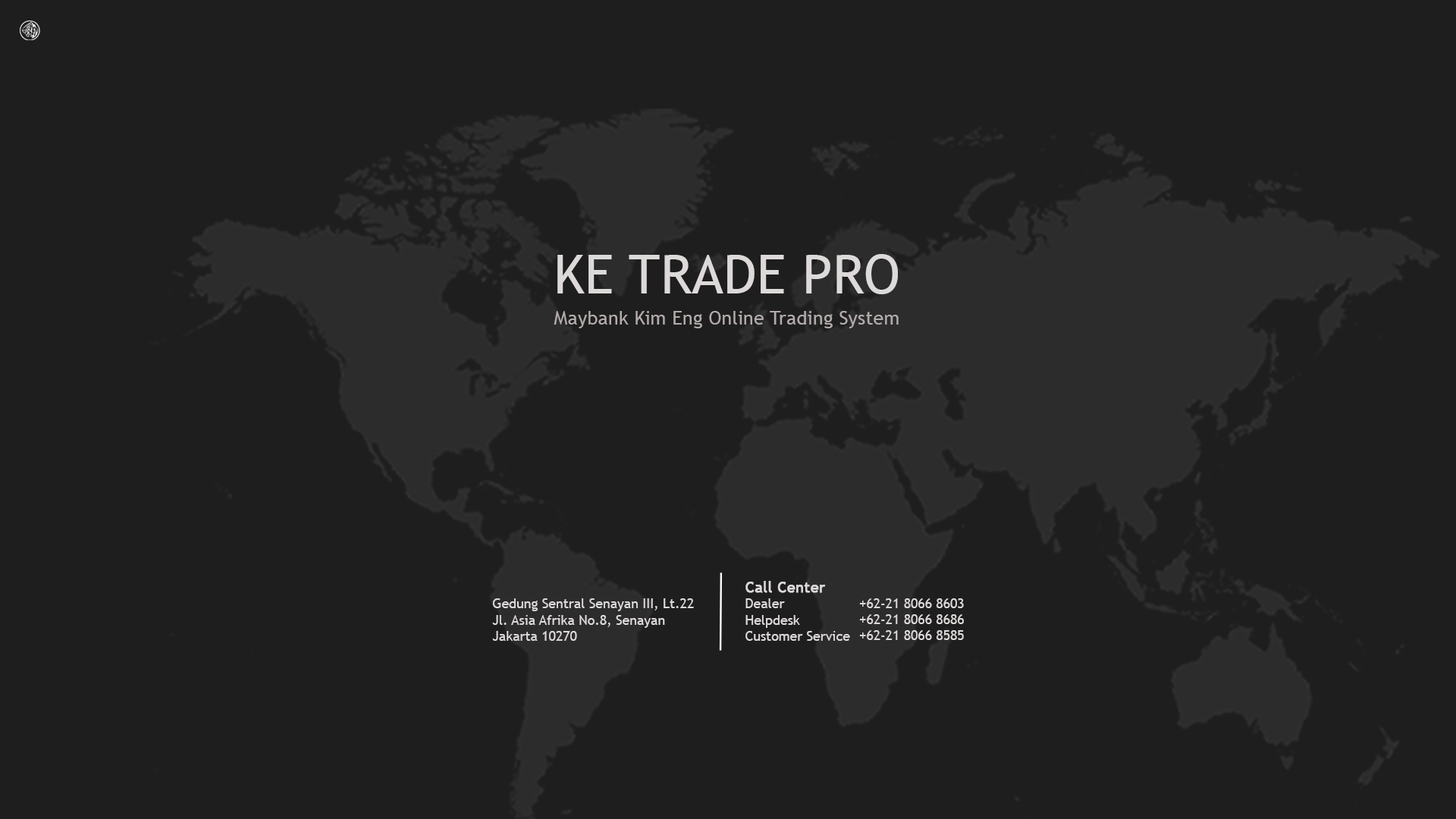
<style>
.page{position:relative;width:1456px;height:819px;background:#1e1e1e}
.page>*{position:absolute;margin:0}
.t1{font:19.3px/30.9px "TrebuchetMS";color:#beb5b5}
.t2{font:54.1px/30.9px "TrebuchetMS";color:#ebe7e7}
.t3{font:13.5px "TrebuchetMS";color:#ddd9d9}
.t4{font:15px "TrebuchetMS";color:#ddd9d9;font-weight:bold}
.t5{font:15px "TrebuchetMS";color:#ddd9d9;font-weight:bold;text-decoration:underline}
</style>
<div class="page">
<p class="t1" style="left:554px;top:254px;width:345px;height:74px;text-align:center;opacity:0.9"><span class="t2">KE TRADE PRO<br></span>Maybank Kim Eng Online Trading System</p>
<p class="t3" style="left:745px;top:581px;width:105px;height:60px"><span class="t4">Call Center<br></span>Dealer        <br>Helpdesk       <br>Customer Service</p>
<p class="t3" style="left:492px;top:598px;width:202px;height:43px"><span class="t5"><br></span>Gedung Sentral Senayan III, Lt.22<br>Jl. Asia Afrika No.8, Senayan<br>Jakarta 10270</p>
<p class="t3" style="left:859px;top:598px;width:105px;height:42px">+62-21 8066 8603<br>+62-21 8066 8686<br>+62-21 8066 8585</p>
</div>
